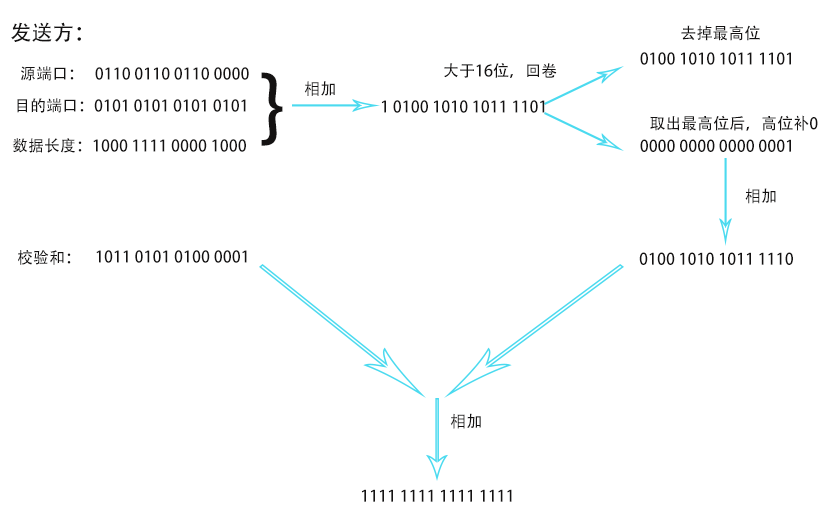
<style>
.page{position:relative;width:831px;height:522px;background:#ffffff}
.page>*{position:absolute;margin:0}
.t1{font:21.3px "AdobeHeitiStd-Regular";color:#141212}
.t2{font:16px "AdobeHeitiStd-Regular";color:#141212}
.t3{font:80.7px "AdobeHeitiStd-Regular";color:#141212}
</style>
<div class="page">
<p class="t1" style="left:11px;top:22px;width:70px;height:20px">发送方：</p>
<p class="t2" style="left:681px;top:25px;width:79px;height:16px">去掉最高位</p>
<p class="t2" style="left:640px;top:52px;width:151px;height:13px">0100 1010 1011 1101</p>
<p class="t2" style="left:444px;top:63px;width:113px;height:15px">大于16位，回卷</p>
<p class="t2" style="left:21px;top:66px;width:228px;height:15px">源端口：   0110 0110 0110 0000</p>
<p class="t3" style="left:261px;top:72px;width:22px;height:74px">}</p>
<p class="t2" style="left:304px;top:81px;width:31px;height:15px">相加</p>
<p class="t2" style="left:17px;top:98px;width:229px;height:15px">目的端口：0101 0101 0101 0101</p>
<p class="t2" style="left:381px;top:100px;width:164px;height:13px">1 0100 1010 1011 1101</p>
<p class="t2" style="left:650px;top:115px;width:168px;height:16px">取出最高位后，高位补0</p>
<p class="t2" style="left:12px;top:138px;width:234px;height:15px">数据长度：1000 1111 0000 1000</p>
<p class="t2" style="left:640px;top:139px;width:151px;height:13px">0000 0000 0000 0001</p>
<p class="t2" style="left:745px;top:188px;width:31px;height:16px">相加</p>
<p class="t2" style="left:18px;top:250px;width:53px;height:15px">校验和：</p>
<p class="t2" style="left:96px;top:250px;width:151px;height:13px">1011 0101 0100 0001</p>
<p class="t2" style="left:639px;top:252px;width:154px;height:13px">0100 1010 1011 1110</p>
<p class="t2" style="left:450px;top:413px;width:31px;height:16px">相加</p>
<p class="t2" style="left:361px;top:489px;width:151px;height:13px">1111 1111 1111 1111</p>
</div>
